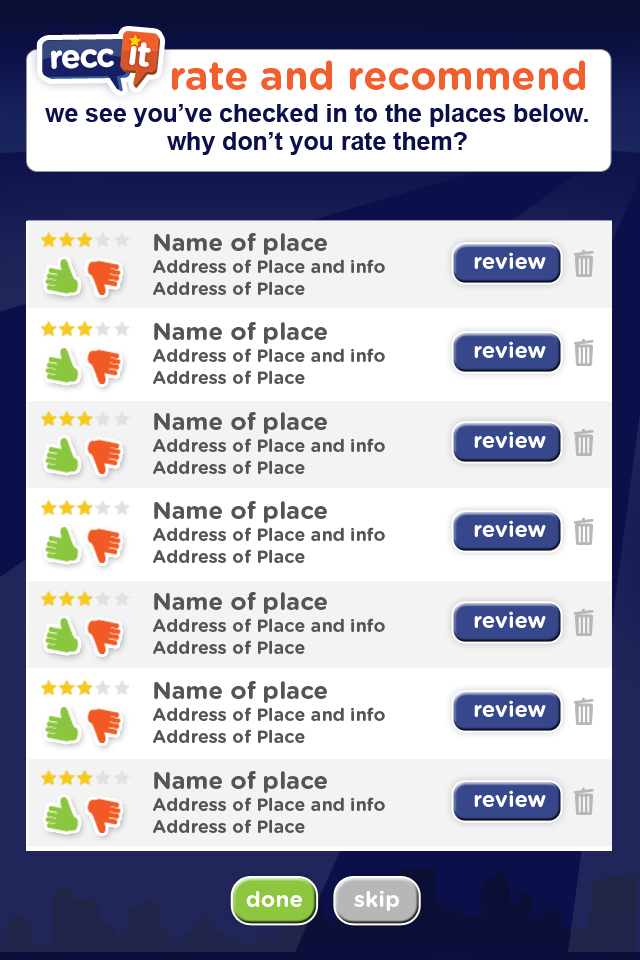
<style>
.page{position:relative;width:640px;height:960px;background:#ffffff}
.page>*{position:absolute;margin:0}
.t1{font:39.7px "GothamRounded-Bold";color:#f15f2e}
.t2{font:24.8px/28px "Arial-BoldMT";color:#0b104a}
.t3{font:18px/22px "GothamRounded-Bold";color:#555555}
.t4{font:24px/22px "GothamRounded-Bold";color:#555555}
.t5{font:22px "GothamRounded-Bold";color:#ffffff}
.t6{font:22.2px "GothamRounded-Bold";color:#ffffff}
</style>
<div class="page">
<p class="t1" style="left:172px;top:60px;width:413px;height:30px">rate and recommend</p>
<p class="t2" style="left:45px;top:104px;width:543px;height:51px;text-align:center">we see you’ve checked in to the places below.<br>why don’t you rate them?</p>
<p class="t3" style="left:153px;top:233px;width:232px;height:62px"><span class="t4">Name of place      <br></span>Address of Place and info<br>Address of Place</p>
<p class="t5" style="left:474px;top:252px;width:72px;height:17px">review</p>
<p class="t3" style="left:153px;top:322px;width:232px;height:62px"><span class="t4">Name of place      <br></span>Address of Place and info<br>Address of Place</p>
<p class="t5" style="left:474px;top:341px;width:72px;height:17px">review</p>
<p class="t3" style="left:153px;top:412px;width:232px;height:62px"><span class="t4">Name of place      <br></span>Address of Place and info<br>Address of Place</p>
<p class="t5" style="left:474px;top:431px;width:72px;height:17px">review</p>
<p class="t3" style="left:153px;top:501px;width:232px;height:62px"><span class="t4">Name of place      <br></span>Address of Place and info<br>Address of Place</p>
<p class="t5" style="left:474px;top:520px;width:72px;height:17px">review</p>
<p class="t3" style="left:153px;top:592px;width:232px;height:62px"><span class="t4">Name of place      <br></span>Address of Place and info<br>Address of Place</p>
<p class="t5" style="left:474px;top:611px;width:72px;height:17px">review</p>
<p class="t3" style="left:153px;top:681px;width:232px;height:62px"><span class="t4">Name of place      <br></span>Address of Place and info<br>Address of Place</p>
<p class="t5" style="left:474px;top:700px;width:72px;height:17px">review</p>
<p class="t3" style="left:153px;top:771px;width:232px;height:62px"><span class="t4">Name of place      <br></span>Address of Place and info<br>Address of Place</p>
<p class="t5" style="left:474px;top:790px;width:72px;height:17px">review</p>
<p class="t6" style="left:246px;top:890px;width:56px;height:17px">done</p>
<p class="t6" style="left:354px;top:890px;width:45px;height:21px">skip</p>
</div>
